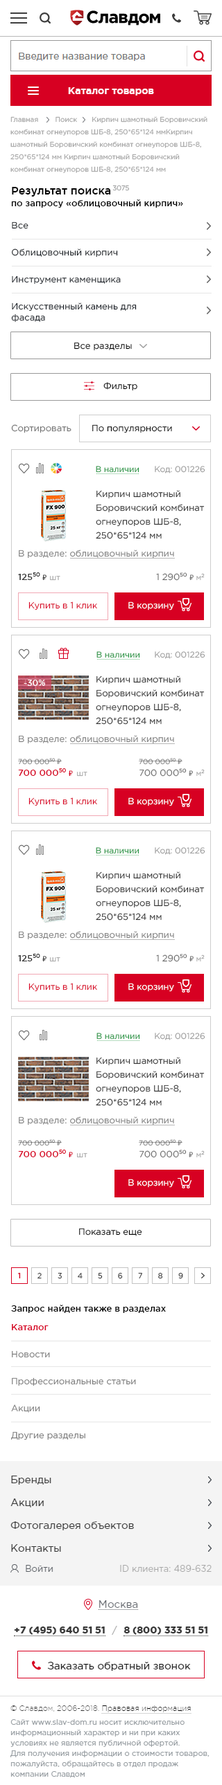
<style>
.page{position:relative;width:222px;height:1785px;background:#ffffff}
.page>*{position:absolute;margin:0}
.t1{font:6.9px/12.5px "GothamPro";color:#a7a7a7}
.t2{font:6.9px "GothamPro";letter-spacing:-0.025em}
.t3{font:11.1px "GothamPro-Medium";color:#010101}
.t4{font:9px "GothamPro-Medium";color:#000000}
.t5{font:9px/27px "GothamPro";color:#151b23}
.t6{font:9px/27px "GothamPro";letter-spacing:0.002em;color:#151b23}
.t7{font:9px "GothamPro";color:#151b23}
.t8{font:9px "GothamPro";color:#000000}
.t9{font:9px "GothamPro";color:#737373}
.t10{font:8.3px "GothamPro";color:#249542}
.t11{font:8.3px "GothamPro";color:#9a9a9a}
.t12{font:9px/13.8px "GothamPro";color:#333333}
.t13{font:9px "GothamPro";color:#818181}
.t14{font:9px "GothamPro-Medium";color:#333333}
.t15{font:8.3px "Calibri";color:#333333}
.t16{font:7.6px "GothamPro"}
.t17{font:9px "GothamPro";color:#6e6e6e}
.t18{font:8.3px "Calibri";color:#6e6e6e}
.t19{font:7.6px "GothamPro";color:#a1a1a1}
.t20{font:8.3px "GothamPro";color:#a1a1a1}
.t21{font:9px "GothamPro";color:#d90527}
.t22{font:9px "GothamPro";color:#ffffff}
.t23{font:8.3px "GothamPro-Medium";color:#ffffff}
.t24{font:7.1px "GothamPro";color:#8b8b8b}
.t25{font:8.1px "Calibri";color:#8b8b8b}
.t26{font:9px "GothamPro-Medium";color:#d70022}
.t27{font:8.3px "Calibri";color:#d70022}
.t28{font:7.6px "GothamPro-Medium";color:#d70022}
.t29{font:7.6px "GothamPro";color:#343434}
.t30{font:9px/27px "GothamPro";color:#7c7c7c}
.t31{font:9px/27px "GothamPro-Medium";color:#d70022}
</style>
<div class="page">
<p class="t1" style="left:10px;top:116px;width:197px;height:57px">Главная        Поиск       Кирпич шамотный Боровичский <br>комбинат огнеупоров ШБ-8, 250*65*124 ммКирпич <br>шамотный Боровичский комбинат огнеупоров ШБ-8, <br>250*65*124 мм Кирпич шамотный Боровичский <br>комбинат огнеупоров ШБ-8, 250*65*124 мм</p>
<p class="t2" style="left:112px;top:185px;width:17px;height:6px">3075</p>
<p class="t3" style="left:12px;top:187px;width:99px;height:10px">Результат поиска</p>
<p class="t4" style="left:11px;top:199px;width:172px;height:9px">по запросу «облицовочный кирпич»</p>
<p class="t5" style="left:11px;top:222px;width:125px;height:101px"><span class="t6">Все<br></span>Облицовочный кирпич<br>Инструмент каменщика<br>Искусственный камень для <br><span class="t7">фасада</span></p>
<p class="t8" style="left:74px;top:342px;width:58px;height:9px">Все разделы</p>
<p class="t8" style="left:103px;top:382px;width:34px;height:9px">Фильтр</p>
<p class="t9" style="left:11px;top:424px;width:60px;height:9px">Сортировать</p>
<p class="t8" style="left:92px;top:424px;width:80px;height:9px">По популярности</p>
<p class="t10" style="left:96px;top:466px;width:43px;height:7px">В наличии</p>
<p class="t11" style="left:154px;top:466px;width:51px;height:8px">Код: 001226</p>
<p class="t12" style="left:96px;top:490px;width:108px;height:49px">Кирпич шамотный <br>Боровичский комбинат <br>огнеупоров ШБ-8, <br>250*65*124 мм</p>
<p class="t13" style="left:19px;top:550px;width:155px;height:9px">В разделе: облицовочный кирпич</p>
<p class="t14" style="left:18px;top:573px;width:28px;height:8px">12550 <span class="t15">₽</span></p>
<p class="t16" style="left:50px;top:576px;width:10px;height:5px">шт</p>
<p class="t17" style="left:156px;top:573px;width:37px;height:8px">1 29050 <span class="t18">₽</span></p>
<p class="t19" style="left:196px;top:573px;width:8px;height:8px">м<span class="t20">2</span></p>
<p class="t21" style="left:28px;top:602px;width:69px;height:9px">Купить в 1 клик</p>
<p class="t22" style="left:128px;top:602px;width:46px;height:9px">В корзину</p>
<p class="t10" style="left:96px;top:651px;width:44px;height:7px">В наличии</p>
<p class="t11" style="left:154px;top:651px;width:51px;height:8px">Код: 001226</p>
<p class="t12" style="left:96px;top:676px;width:108px;height:49px">Кирпич шамотный <br>Боровичский комбинат <br>огнеупоров ШБ-8, <br>250*65*124 мм</p>
<p class="t23" style="left:24px;top:680px;width:21px;height:6px">-30%</p>
<p class="t13" style="left:19px;top:735px;width:155px;height:9px">В разделе: облицовочный кирпич</p>
<p class="t24" style="left:18px;top:758px;width:43px;height:7px">700 00050 <span class="t25">₽</span></p>
<p class="t24" style="left:138px;top:758px;width:43px;height:7px">700 00050 <span class="t25">₽</span></p>
<p class="t26" style="left:18px;top:768px;width:55px;height:9px">700 00050 <span class="t27">₽</span></p>
<p class="t16" style="left:77px;top:772px;width:10px;height:5px">шт</p>
<p class="t17" style="left:139px;top:768px;width:53px;height:9px">700 00050 <span class="t18">₽</span></p>
<p class="t19" style="left:196px;top:769px;width:8px;height:8px">м<span class="t20">2</span></p>
<p class="t21" style="left:28px;top:798px;width:69px;height:9px">Купить в 1 клик</p>
<p class="t22" style="left:128px;top:798px;width:46px;height:9px">В корзину</p>
<p class="t10" style="left:96px;top:847px;width:43px;height:7px">В наличии</p>
<p class="t11" style="left:154px;top:847px;width:51px;height:8px">Код: 001226</p>
<p class="t12" style="left:96px;top:872px;width:108px;height:49px">Кирпич шамотный <br>Боровичский комбинат <br>огнеупоров ШБ-8, <br>250*65*124 мм</p>
<p class="t13" style="left:19px;top:931px;width:155px;height:9px">В разделе: облицовочный кирпич</p>
<p class="t14" style="left:18px;top:954px;width:28px;height:8px">12550 <span class="t15">₽</span></p>
<p class="t16" style="left:50px;top:957px;width:10px;height:5px">шт</p>
<p class="t17" style="left:156px;top:954px;width:37px;height:8px">1 29050 <span class="t18">₽</span></p>
<p class="t19" style="left:196px;top:955px;width:8px;height:7px">м<span class="t20">2</span></p>
<p class="t21" style="left:28px;top:983px;width:69px;height:9px">Купить в 1 клик</p>
<p class="t22" style="left:128px;top:983px;width:46px;height:9px">В корзину</p>
<p class="t10" style="left:96px;top:1033px;width:44px;height:7px">В наличии</p>
<p class="t11" style="left:154px;top:1033px;width:51px;height:8px">Код: 001226</p>
<p class="t12" style="left:96px;top:1057px;width:108px;height:49px">Кирпич шамотный <br>Боровичский комбинат <br>огнеупоров ШБ-8, <br>250*65*124 мм</p>
<p class="t13" style="left:19px;top:1117px;width:155px;height:9px">В разделе: облицовочный кирпич</p>
<p class="t24" style="left:18px;top:1140px;width:43px;height:6px">700 00050 <span class="t25">₽</span></p>
<p class="t24" style="left:138px;top:1140px;width:43px;height:6px">700 00050 <span class="t25">₽</span></p>
<p class="t26" style="left:18px;top:1150px;width:55px;height:8px">700 00050 <span class="t27">₽</span></p>
<p class="t16" style="left:77px;top:1153px;width:10px;height:5px">шт</p>
<p class="t17" style="left:139px;top:1150px;width:53px;height:8px">700 00050 <span class="t18">₽</span></p>
<p class="t19" style="left:196px;top:1151px;width:8px;height:7px">м<span class="t20">2</span></p>
<p class="t22" style="left:128px;top:1179px;width:46px;height:9px">В корзину</p>
<p class="t8" style="left:79px;top:1228px;width:63px;height:8px">Показать еще</p>
<p class="t28" style="left:17px;top:1273px;width:4px;height:6px">1</p>
<p class="t16" style="left:37px;top:1273px;width:5px;height:6px">2</p>
<p class="t16" style="left:57px;top:1273px;width:5px;height:6px">3</p>
<p class="t16" style="left:78px;top:1273px;width:4px;height:6px">4</p>
<p class="t29" style="left:98px;top:1273px;width:4px;height:6px">5</p>
<p class="t16" style="left:118px;top:1273px;width:5px;height:6px">6</p>
<p class="t16" style="left:138px;top:1273px;width:4px;height:6px">7</p>
<p class="t16" style="left:158px;top:1273px;width:5px;height:6px">8</p>
<p class="t16" style="left:178px;top:1273px;width:5px;height:6px">9</p>
<p class="t4" style="left:11px;top:1305px;width:154px;height:8px">Запрос найден также в разделах</p>
<p class="t30" style="left:11px;top:1324px;width:125px;height:117px"><span class="t31">Каталог<br></span>Новости<br>Профессиональные статьи<br>Акции<br>Другие разделы</p>
</div>
